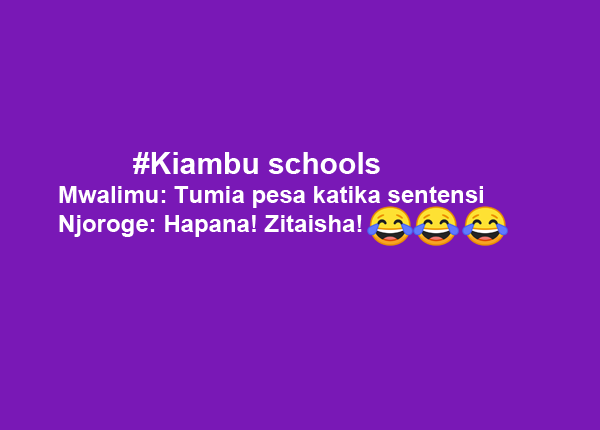
<style>
.page{position:relative;width:600px;height:430px;background:#7918b6}
.page>*{position:absolute;margin:0}
.t1{font:24px "Arial-BoldMT";color:#ffffff}
.t2{font:30px "Arial-BoldMT";color:#ffffff}
</style>
<div class="page">
<p class="t1" style="left:59px;top:152px;width:424px;height:85px"><span class="t2">         #Kiambu schools<br></span>Mwalimu: Tumia pesa katika sentensi<br>Njoroge: Hapana! Zitaisha!</p>
</div>
